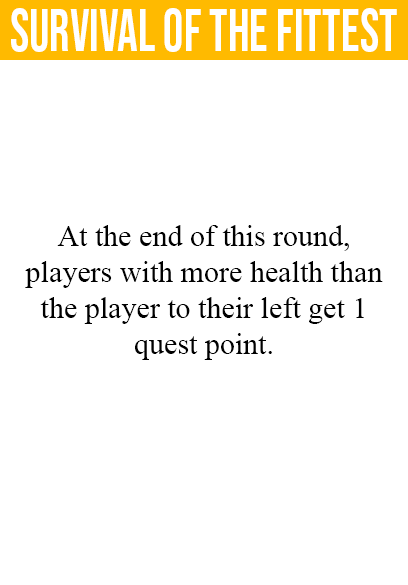
<style>
.page{position:relative;width:408px;height:585px;background:#ffffff}
.page>*{position:absolute;margin:0}
.t1{font:60px "BebasNeue-Regular";color:#ffffff;scale:0.85 1}
.t2{font:30px "TimesNewRomanPSMT";color:#000000}
</style>
<div class="page">
<p class="t1" style="left:11px;top:8px;width:386px;height:44px">survival of the fittest</p>
<p class="t2" style="left:25px;top:225px;width:358px;height:135px;text-align:center">At the end of this round,<br>players with more health than<br>the player to their left get 1<br>quest point.</p>
</div>
